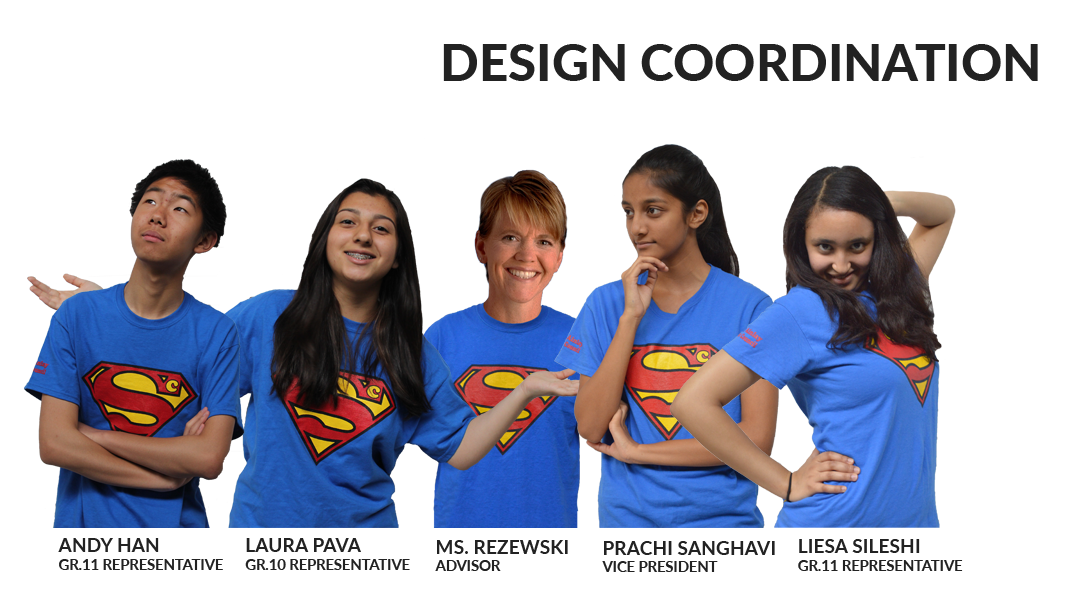
<style>
.page{position:relative;width:1080px;height:600px;background:#ffffff}
.page>*{position:absolute;margin:0}
.t1{font:51px "Lato-Heavy";color:#222222}
.t2{font:14.6px "Lato-Bold";color:#222222}
.t3{font:19.2px "Lato-Bold";color:#222222}
</style>
<div class="page">
<p class="t1" style="left:443px;top:44px;width:595px;height:37px">DESIGN COORDINATION</p>
<p class="t2" style="left:58px;top:538px;width:165px;height:32px"><span class="t3">ANDY HAN<br></span>GR.11 REPRESENTATIVE</p>
<p class="t2" style="left:245px;top:538px;width:165px;height:32px"><span class="t3">LAURA PAVA<br></span>GR.10 REPRESENTATIVE</p>
<p class="t3" style="left:435px;top:540px;width:133px;height:31px">MS. REZEWSKI<br><span class="t2">ADVISOR</span></p>
<p class="t3" style="left:602px;top:541px;width:173px;height:31px">PRACHI SANGHAVI<br><span class="t2">VICE PRESIDENT</span></p>
<p class="t2" style="left:798px;top:539px;width:165px;height:32px"><span class="t3">LIESA SILESHI<br></span>GR.11 REPRESENTATIVE</p>
</div>
